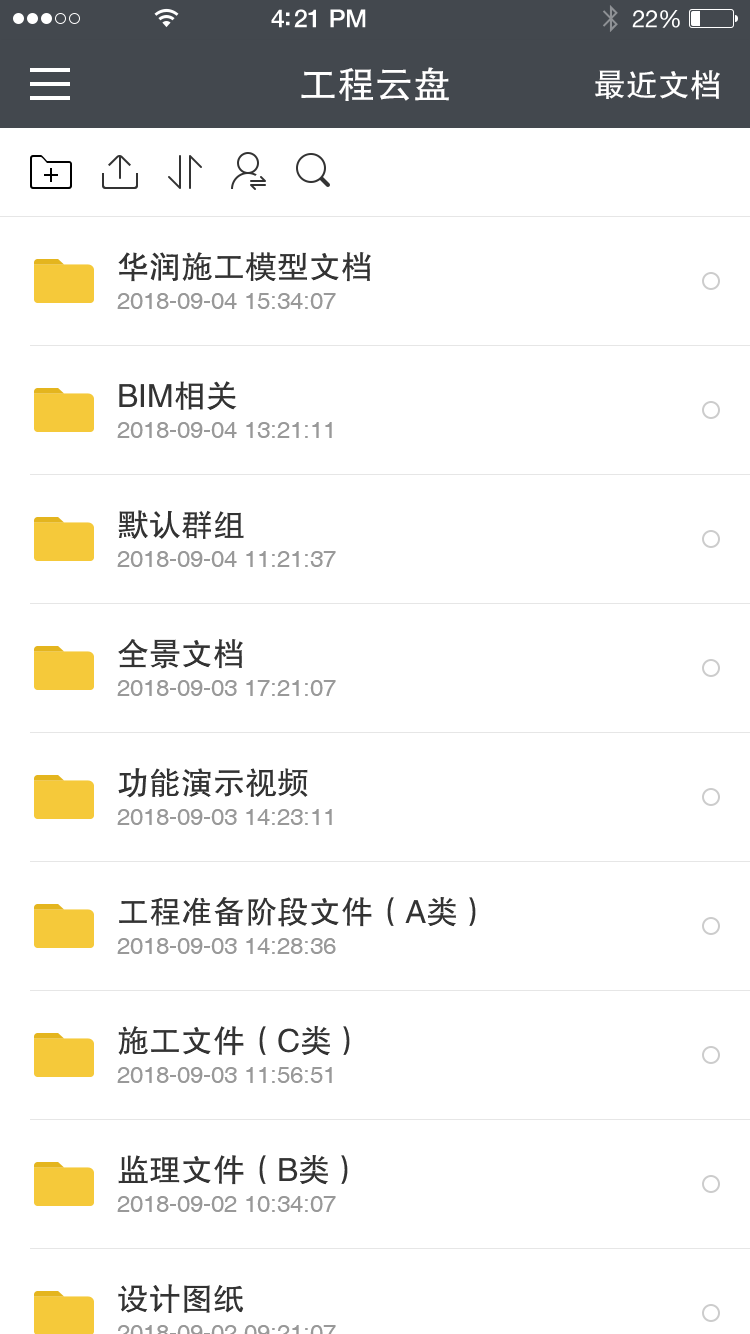
<style>
.page{position:relative;width:750px;height:1334px;background:#ffffff}
.page>*{position:absolute;margin:0}
.t1{font:38px "FZHTJW--GB1-0";color:#ffffff}
.t2{font:32px "FZHTJW--GB1-0";color:#ffffff}
.t3{font:32px "FZHTJW--GB1-0";color:#333333}
.t4{font:24px "Helvetica";color:#999999}
</style>
<div class="page">
<p class="t1" style="left:301px;top:67px;width:148px;height:34px">工程云盘</p>
<p class="t2" style="left:595px;top:70px;width:125px;height:30px">最近文档</p>
<p class="t3" style="left:118px;top:252px;width:253px;height:30px">华润施工模型文档</p>
<p class="t4" style="left:117px;top:293px;width:219px;height:16px">2018-09-04 15:34:07</p>
<p class="t3" style="left:119px;top:381px;width:118px;height:29px">BIM相关</p>
<p class="t4" style="left:117px;top:422px;width:215px;height:16px">2018-09-04 13:21:11</p>
<p class="t3" style="left:118px;top:510px;width:126px;height:29px">默认群组</p>
<p class="t4" style="left:117px;top:551px;width:219px;height:16px">2018-09-04 11:21:37</p>
<p class="t3" style="left:118px;top:639px;width:125px;height:30px">全景文档</p>
<p class="t4" style="left:117px;top:680px;width:219px;height:16px">2018-09-03 17:21:07</p>
<p class="t3" style="left:118px;top:768px;width:190px;height:30px">功能演示视频</p>
<p class="t4" style="left:117px;top:809px;width:215px;height:16px">2018-09-03 14:23:11</p>
<p class="t3" style="left:119px;top:897px;width:357px;height:30px">工程准备阶段文件（A类）</p>
<p class="t4" style="left:117px;top:938px;width:219px;height:16px">2018-09-03 14:28:36</p>
<p class="t3" style="left:118px;top:1026px;width:232px;height:30px">施工文件（C类）</p>
<p class="t4" style="left:117px;top:1067px;width:215px;height:16px">2018-09-03 11:56:51</p>
<p class="t3" style="left:118px;top:1155px;width:230px;height:30px">监理文件（B类）</p>
<p class="t4" style="left:117px;top:1196px;width:219px;height:16px">2018-09-02 10:34:07</p>
<p class="t3" style="left:118px;top:1284px;width:126px;height:29px">设计图纸</p>
</div>
